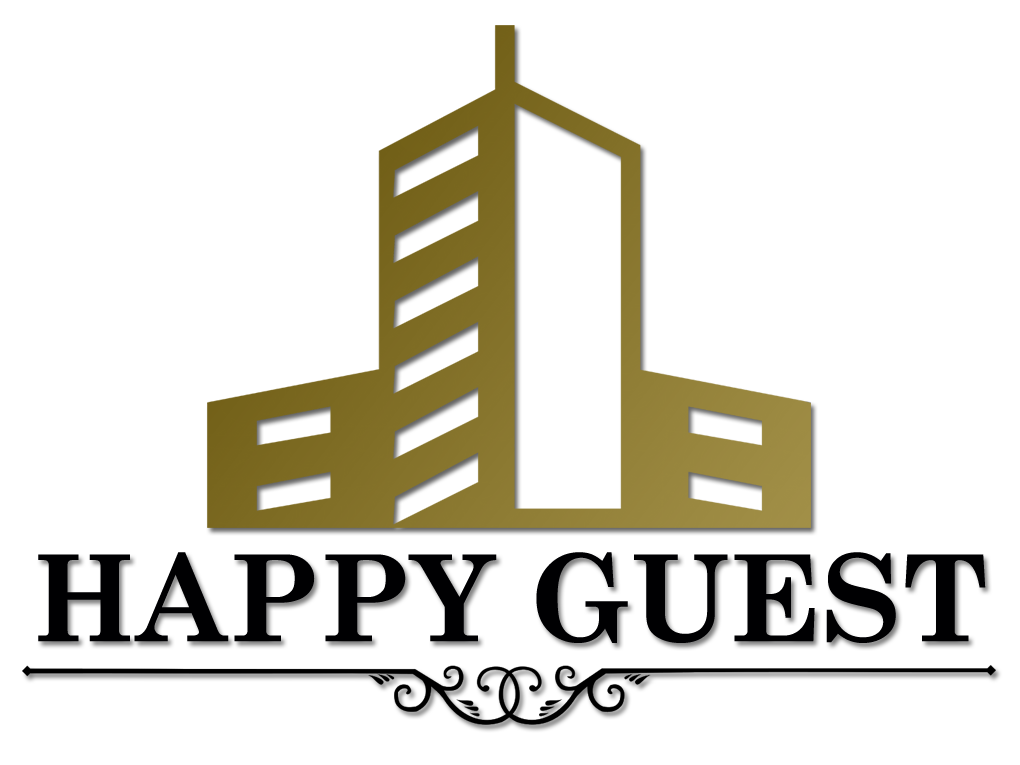
<style>
.page{position:relative;width:1020px;height:765px;background:#ffffff}
.page>*{position:absolute;margin:0}
.t1{font:120px "CenturySchoolbook-Bold";color:#000002}
</style>
<div class="page">
<p class="t1" style="left:38px;top:552px;width:948px;height:91px">HAPPY GUEST</p>
</div>
